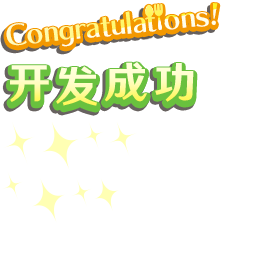
<style>
.page{position:relative;width:256px;height:256px;background:#ffffff}
.page>*{position:absolute;margin:0}
.t1{font:42.7px "HYWenHei-HEW";letter-spacing:0.065em}
.t2{font:42.7px "HYWenHei-HEW";letter-spacing:0.145em}
</style>
<div class="page">
<p class="t1" style="left:10px;top:65px;width:39px;height:37px">开</p>
<p class="t2" style="left:104px;top:62px;width:90px;height:40px">成功</p>
<p class="t1" style="left:56px;top:66px;width:41px;height:40px">发</p>
</div>
